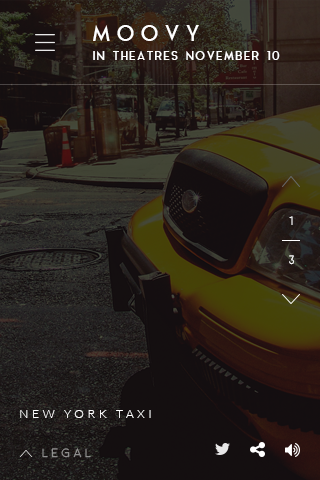
<style>
.page{position:relative;width:320px;height:480px}
.page>*{position:absolute;margin:0}
.t1{font:22px "AquaGrotesque";letter-spacing:0.2em;color:#ffffff;text-transform:uppercase}
.t2{font:12px "AquaGrotesque";letter-spacing:0.05em;color:#ffffff;text-transform:uppercase}
.t3{font:12px "Moon-Light";color:#ffffff}
.t4{font:12px "Lato-Light";letter-spacing:0.3em;color:#ffffff;text-transform:uppercase}
.t5{font:12px "Moon-Light";letter-spacing:0.3em;text-transform:uppercase}
</style>
<div class="page">
<p class="t1" style="left:93px;top:25px;width:106px;height:16px">moovy</p>
<p class="t2" style="left:93px;top:51px;width:187px;height:9px">IN THEATRES NoveMBER 10</p>
<p class="t3" style="left:289px;top:216px;width:4px;height:9px">1</p>
<p class="t3" style="left:289px;top:255px;width:5px;height:10px">3</p>
<p class="t4" style="left:20px;top:410px;width:131px;height:8px">new york taxi</p>
<p class="t5" style="left:42px;top:448px;width:49px;height:10px">legal</p>
</div>
